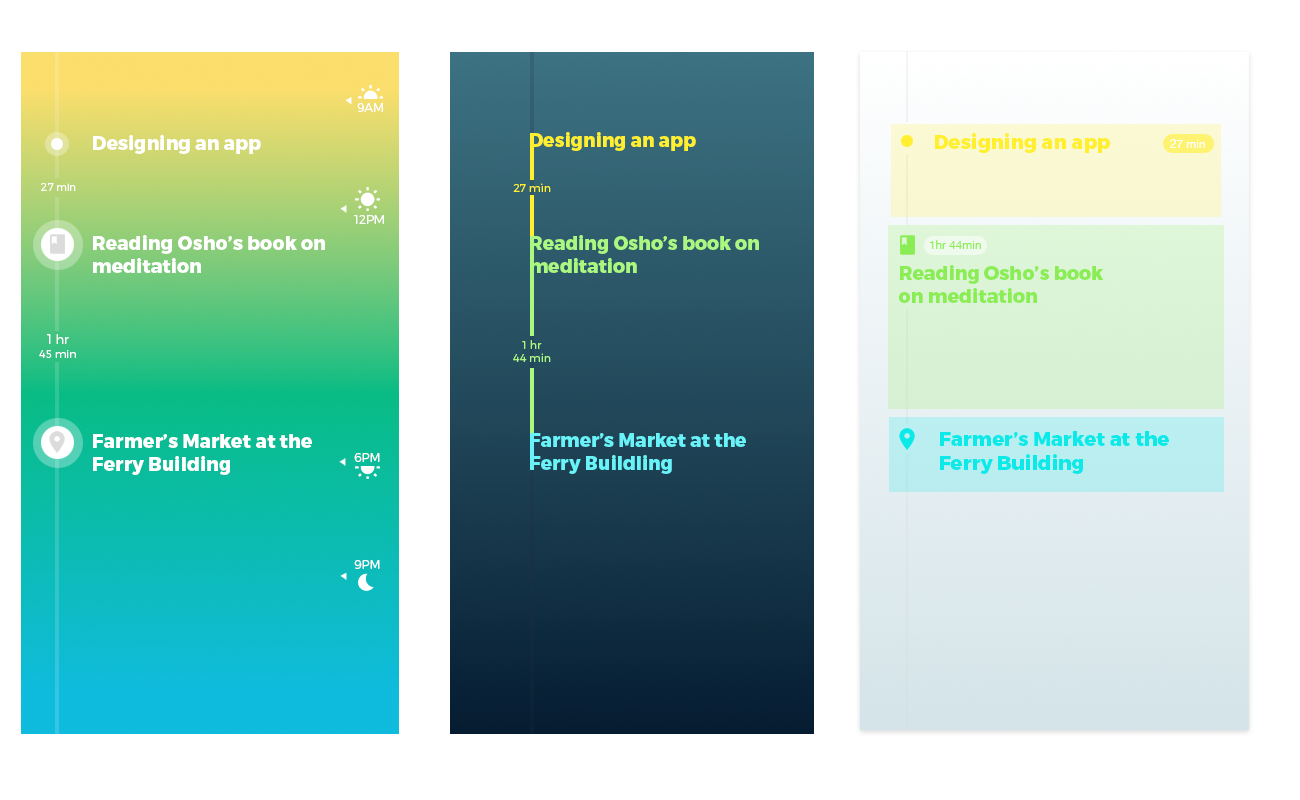
<style>
.page{position:relative;width:1300px;height:800px;background:#ffffff}
.page>*{position:absolute;margin:0}
.t1{font:12.1px "Montserrat-Light";color:#ffffff}
.t2{font:19px "Montserrat-ExtraBold";color:#ffffff}
.t3{font:19px "Montserrat-ExtraBold";color:#ffef2e}
.t4{font:19.9px "Montserrat-ExtraBold";color:#ffef2e}
.t5{font:12px "HelveticaNeue";color:#ffffff}
.t6{font:10px "Montserrat-Light";color:#ffffff}
.t7{font:11px "Montserrat-Light";color:#ffffff}
.t8{font:11.2px "Montserrat-Light";color:#ffef2e}
.t9{font:19px "Montserrat-ExtraBold";color:#abf881}
.t10{font:12px "HelveticaNeue";color:#8aed53}
.t11{font:19px "Montserrat-ExtraBold";color:#8aed53}
.t12{font:13px "Montserrat-Light";color:#ffffff}
.t13{font:11.2px "Montserrat-Light";color:#abf881}
.t14{font:19px "Montserrat-ExtraBold";color:#69f3f8}
.t15{font:19.9px "Montserrat-ExtraBold";color:#0be9e9}
</style>
<div class="page">
<p class="t1" style="left:357px;top:103px;width:26px;height:9px">9AM</p>
<p class="t2" style="left:93px;top:135px;width:168px;height:19px">Designing an app</p>
<p class="t3" style="left:530px;top:132px;width:166px;height:19px">Designing an app</p>
<p class="t4" style="left:935px;top:133px;width:175px;height:20px">Designing an app</p>
<p class="t5" style="left:1170px;top:139px;width:35px;height:9px">27 min</p>
<p class="t6" style="left:41px;top:183px;width:35px;height:8px"><span class="t7">27 </span>min</p>
<p class="t8" style="left:513px;top:183px;width:38px;height:9px">27 min</p>
<p class="t1" style="left:354px;top:215px;width:30px;height:9px">12PM</p>
<p class="t2" style="left:93px;top:235px;width:232px;height:38px">Reading Osho’s book on<br>meditation</p>
<p class="t9" style="left:530px;top:235px;width:229px;height:38px">Reading Osho’s book on<br>meditation</p>
<p class="t10" style="left:929px;top:240px;width:52px;height:9px">1hr 44min</p>
<p class="t11" style="left:899px;top:265px;width:205px;height:38px">Reading Osho’s book<br>on meditation</p>
<p class="t7" style="left:39px;top:334px;width:37px;height:24px;text-align:center"><span class="t12">1 hr<br></span>45 min</p>
<p class="t13" style="left:513px;top:340px;width:38px;height:22px;text-align:center">1 hr<br>44 min</p>
<p class="t2" style="left:93px;top:434px;width:219px;height:41px">Farmer’s Market at the<br>Ferry Building</p>
<p class="t14" style="left:530px;top:433px;width:216px;height:41px">Farmer’s Market at the<br>Ferry Buildling</p>
<p class="t15" style="left:940px;top:431px;width:229px;height:43px">Farmer’s Market at the<br>Ferry Building</p>
<p class="t1" style="left:354px;top:453px;width:26px;height:9px">6PM</p>
<p class="t1" style="left:354px;top:560px;width:26px;height:9px">9PM</p>
</div>
